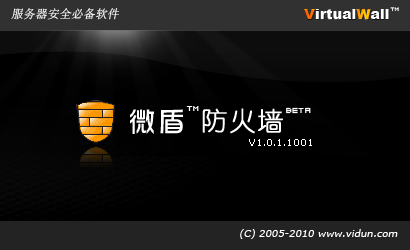
<style>
.page{position:relative;width:410px;height:250px;background:#000000}
.page>*{position:absolute;margin:0}
.t1{font:12px "SimSun";font-style:italic}
.t2{font:13.6px "Arial-Black";letter-spacing:0.025em;color:#ffffff}
.t3{font:13.6px "Arial-Black";letter-spacing:0.025em;color:#ff9900}
.t4{font:4.2px "04b08";letter-spacing:0.025em}
.t5{font:28px "DFHuaZong-W5-WINP-BF";letter-spacing:0.05em;color:#ffffff}
.t6{font:6px "04b08";letter-spacing:0.05em;color:#ffffff}
.t7{font:26px "YouYuan";letter-spacing:0.05em;color:#ffffff;font-weight:bold}
.t8{font:9px "Verdana";color:#ffffff}
.t9{font:10px "Verdana";color:#ffffff;font-style:italic}
</style>
<div class="page">
<p class="t1" style="left:11px;top:8px;width:108px;height:12px">服务器安全必备软件</p>
<p class="t2" style="left:304px;top:9px;width:85px;height:10px"><span class="t3">V</span>irtual<span class="t3">W</span>all</p>
<p class="t4" style="left:390px;top:7px;width:9px;height:5px">TM</p>
<p class="t5" style="left:130px;top:109px;width:53px;height:25px">微盾</p>
<p class="t6" style="left:186px;top:106px;width:13px;height:5px">TM</p>
<p class="t7" style="left:202px;top:108px;width:81px;height:26px">防火墙</p>
<p class="t6" style="left:286px;top:107px;width:25px;height:7px">BETA</p>
<p class="t8" style="left:249px;top:139px;width:63px;height:7px">V1.0.1.1001</p>
<p class="t9" style="left:240px;top:229px;width:158px;height:10px">(C) 2005-2010 www.vidun.com</p>
</div>
